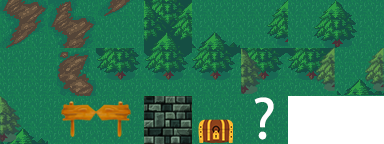
<style>
.page{position:relative;width:384px;height:144px;background:#187454}
.page>*{position:absolute;margin:0}
.t1{font:60px "MyriadPro-Regular";color:#ffffff}
</style>
<div class="page">
<p class="t1" style="left:254px;top:97px;width:20px;height:43px">?</p>
</div>
